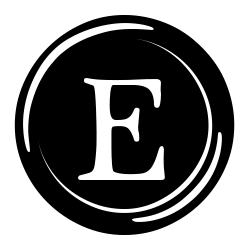
<style>
.page{position:relative;width:250px;height:250px;background:#000000}
.page>*{position:absolute;margin:0}
.t1{font:293.2px "TypeKeysFilled";letter-spacing:0.02em;color:#000000}
</style>
<div class="page">
<p class="t1" style="left:14px;top:15px;width:221px;height:220px">E</p>
</div>
